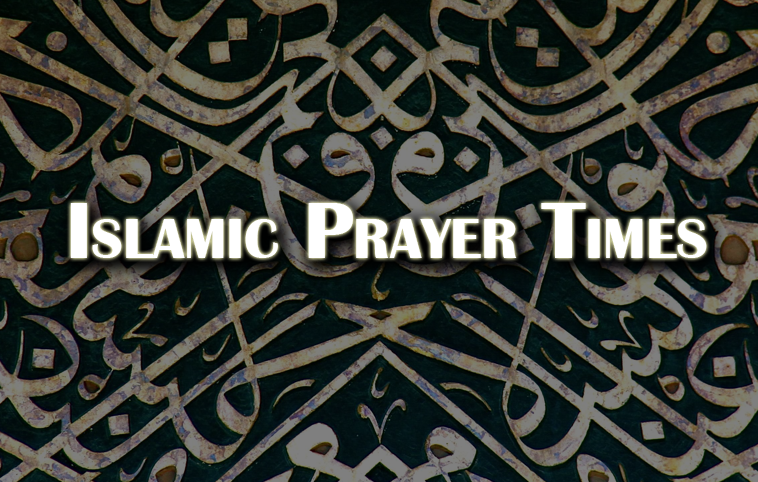
<style>
.page{position:relative;width:758px;height:482px}
.page>*{position:absolute;margin:0}
.t1{font:82.6px "BritannicBold";color:#ffffff;font-variant:small-caps}
</style>
<div class="page">
<p class="t1" style="left:70px;top:203px;width:637px;height:55px">Islamic Prayer Times</p>
</div>
